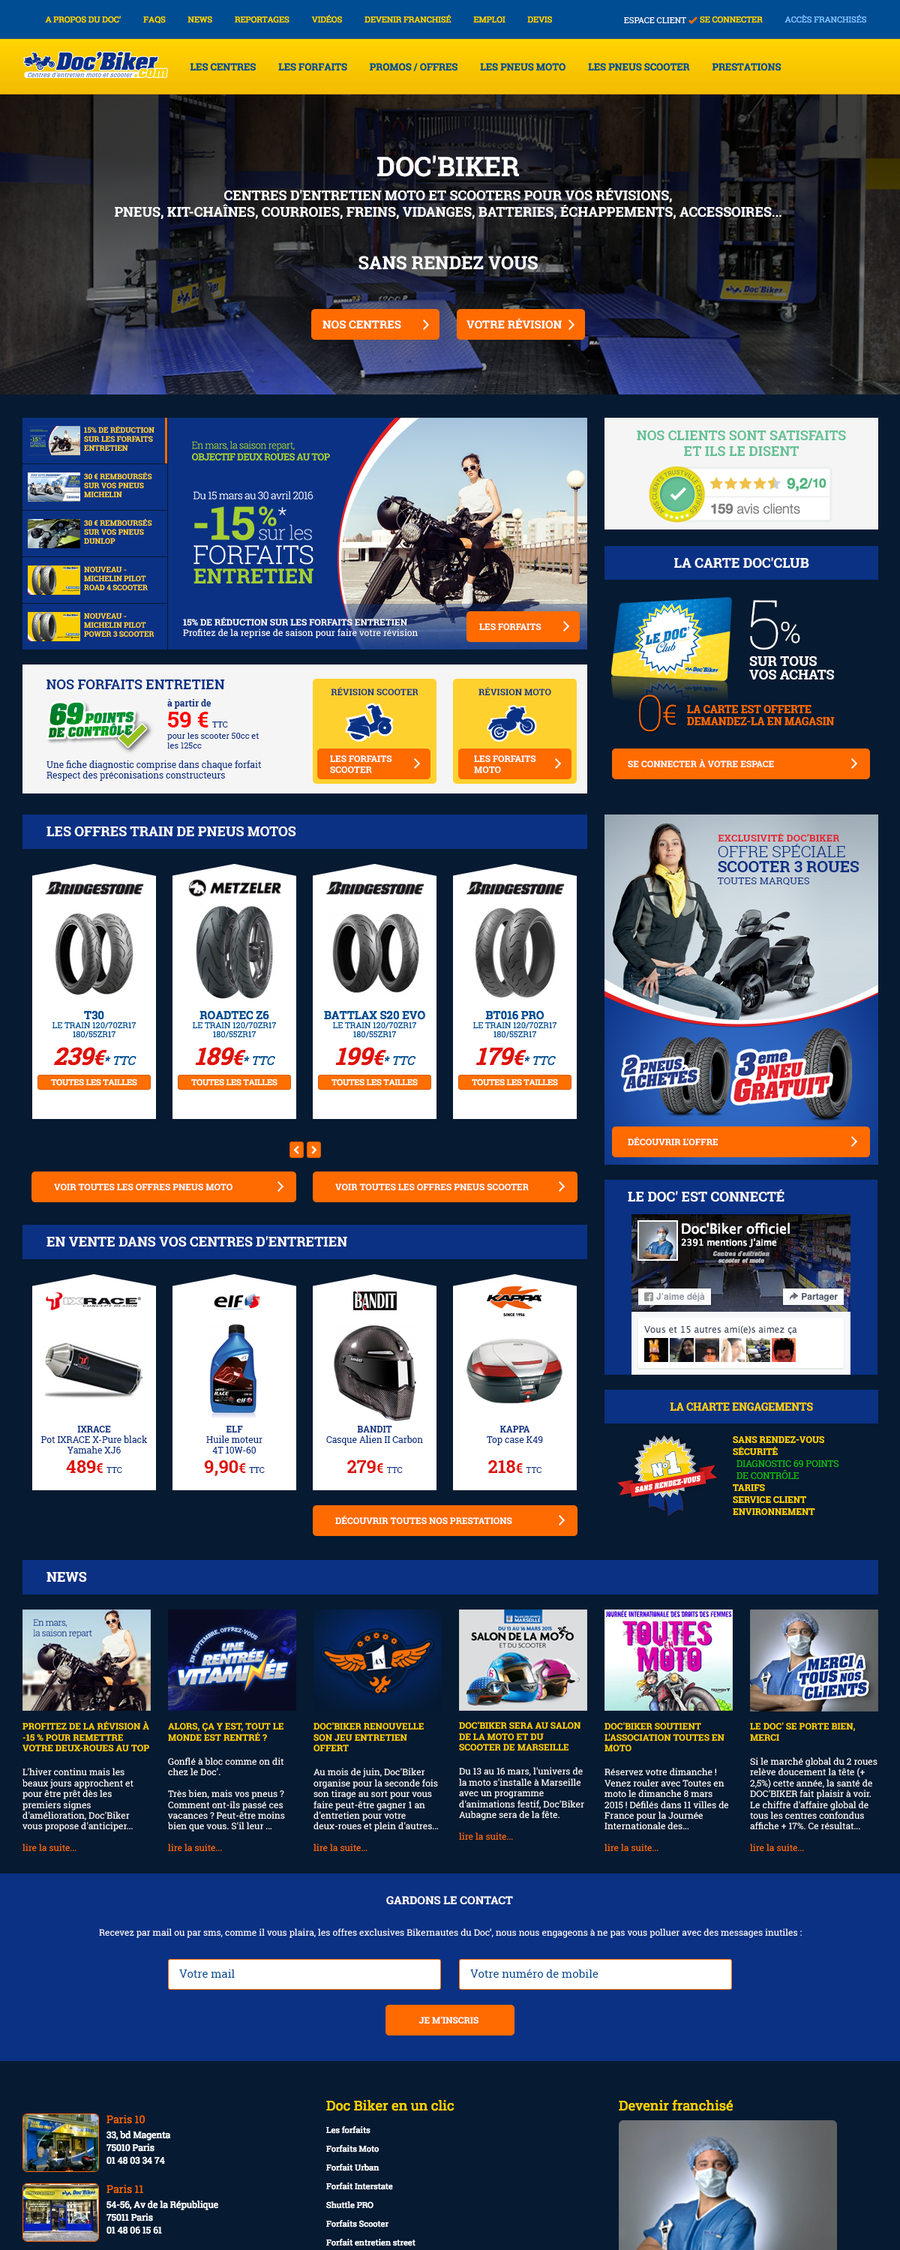
<style>
.page{position:relative;width:900px;height:2250px}
.page>*{position:absolute;margin:0}
.t1{font:13.5px "RobotoSlab-Bold";color:#ffffff}
.t2{font:27px "RobotoSlab-Bold";color:#ffffff}
.t3{font:18px "RobotoSlab-Bold";color:#ffffff}
.t4{font:11.2px "RobotoSlab-Bold";color:#ffffff}
.t5{font:7.5px "RobotoSlab-Bold";color:#ffd32f}
.t6{font:13.5px "RobotoSlab-Bold";color:#65c095}
.t7{font:7.5px "RobotoSlab-Bold";color:#ffd32f;text-transform:uppercase}
.t8{font:68px "RobotoSlab-Thin";color:#ffffff;text-transform:uppercase}
.t9{font:9px "RobotoSlab-Regular";color:#ffffff}
.t10{font:9px "RobotoSlab-Bold";color:#ffffff}
.t11{font:29.3px "RobotoSlab-Light";color:#ffffff;text-transform:uppercase}
.t12{font:13.5px/13.5px "RobotoSlab-Bold";color:#ffffff;text-transform:uppercase}
.t13{font:13.5px "RobotoSlab-Bold";color:#0a3184}
.t14{font:9px "RobotoSlab-Bold";color:#0a3184;text-transform:uppercase}
.t15{font:8.2px/11.2px "RobotoSlab-Regular";color:#0a3184}
.t16{font:9px/22.5px "RobotoSlab-Bold";color:#0a3184}
.t17{font:22.5px/21px "RobotoSlab-Bold";color:#ff0000}
.t18{font:8.2px/21px "RobotoSlab-Regular";color:#0a3184}
.t19{font:8.2px "RobotoSlab-Regular";color:#0a3184}
.t20{font:49.7px "RobotoSlab-Thin";color:#ff6b00;text-transform:uppercase}
.t21{font:27.8px "RobotoSlab-Light";color:#ff6b00;text-transform:uppercase;scale:1.03 1}
.t22{font:10.5px/12px "RobotoSlab-Bold";color:#ff6b00;text-transform:uppercase}
.t23{font:9px/10.5px "RobotoSlab-Regular";color:#0a3184}
.t24{font:9px "RobotoSlab-Bold";color:#ffffff;text-transform:uppercase}
.t25{font:13.5px "RobotoSlab-Bold";color:#ffffff;text-transform:uppercase}
.t26{font:10px "RobotoSlab-Bold";color:#e0232f}
.t27{font:15.7px/15.4px "RobotoSlab-Bold";color:#0a3184}
.t28{font:15.7px/18.4px "RobotoSlab-Light";color:#0a3184}
.t29{font:10px/11.5px "RobotoSlab-Regular";color:#0a3184}
.t30{font:10.5px "RobotoSlab-Bold";color:#ffd200;text-transform:uppercase}
.t31{font:9px/10.5px "RobotoSlab-Bold";color:#0a3184}
.t32{font:18px/19.5px "RobotoSlab-Bold";color:#de130c}
.t33{font:13.5px/19.5px "RobotoSlab-Bold";color:#de130c}
.t34{font:8.2px/19.5px "RobotoSlab-Regular";color:#0a3184}
.t35{font:9px/12px "RobotoSlab-Bold";color:#ffd200;text-transform:uppercase}
.t36{font:9px/12px "RobotoSlab-Regular";color:#14bb0b;text-transform:uppercase}
.t37{font:9px "RobotoSlab-Bold";color:#ffd200;text-transform:uppercase}
.t38{font:9px "RobotoSlab-Regular";color:#ff6b00}
.t39{font:11.2px "RobotoSlab-Bold";color:#ffffff;text-transform:uppercase}
.t40{font:11.2px "RobotoSlab-Regular";color:#004d93}
</style>
<div class="page">
<p class="t1" style="left:115px;top:155px;width:666px;height:115px;text-align:center"><span class="t2">DOC'BIKER <br></span>CENTRES D'ENTRETIEN MOTO ET SCOOTERS POUR VOS RÉVISIONS, <br>PNEUS, KIT-CHAÎNES, COURROIES, FREINS, VIDANGES, BATTERIES, ÉCHAPPEMENTS, ACCESSOIRES...<br><br><span class="t3">SANS RENDEZ VOUS</span></p>
<p class="t4" style="left:466px;top:318px;width:96px;height:11px">VOTRE RÉVISION</p>
<p class="t4" style="left:322px;top:320px;width:79px;height:9px">NOS CENTRES</p>
<p class="t5" style="left:84px;top:426px;width:70px;height:25px">15% DE RÉDUCTION SUR LES FORFAITS<br>ENTRETIEN</p>
<p class="t6" style="left:637px;top:430px;width:209px;height:27px;text-align:center">NOS CLIENTS SONT SATISFAITS<br>ET ILS LE DISENT</p>
<p class="t7" style="left:84px;top:472px;width:68px;height:25px">30 € remboursés<br>sur vos pneus michelin</p>
<p class="t7" style="left:84px;top:519px;width:68px;height:25px">30 € remboursés<br>sur vos pneus dunlop</p>
<p class="t1" style="left:674px;top:557px;width:135px;height:11px">LA CARTE DOC'CLUB</p>
<p class="t7" style="left:84px;top:566px;width:64px;height:24px">nouveau - michelin pilot road 4 scooter</p>
<p class="t8" style="left:750px;top:600px;width:28px;height:50px;rotate:1deg">5</p>
<p class="t7" style="left:84px;top:613px;width:70px;height:24px">nouveau - michelin pilot power 3 scooter</p>
<p class="t9" style="left:183px;top:617px;width:235px;height:21px"><span class="t10">15% DE RÉDUCTION SUR LES FORFAITS ENTRETIEN<br></span>Profitez de la reprise de saison pour faire votre révision</p>
<p class="t10" style="left:479px;top:623px;width:62px;height:7px">LES FORFAITS</p>
<p class="t11" style="left:781px;top:622px;width:19px;height:21px;rotate:1deg">%</p>
<p class="t12" style="left:749px;top:656px;width:85px;height:23px">sur tous <br>vos achats</p>
<p class="t13" style="left:46px;top:679px;width:179px;height:11px">NOS FORFAITS ENTRETIEN</p>
<p class="t14" style="left:331px;top:687px;width:87px;height:8px">révision scooter</p>
<p class="t14" style="left:478px;top:687px;width:73px;height:8px">révision moto</p>
<p class="t15" style="left:167px;top:699px;width:92px;height:49px"><span class="t16">à partir de<br></span><span class="t17">59 € </span><span class="t18">TTC <br></span>pour les scooter 50cc et <span class="t19">les 125cc</span></p>
<p class="t20" style="left:639px;top:694px;width:22px;height:37px;rotate:1deg">0</p>
<p class="t21" style="left:663px;top:704px;width:13px;height:21px">€</p>
<p class="t22" style="left:687px;top:705px;width:148px;height:20px">la carte est offerte<br>demandez-la en magasin</p>
<p class="t23" style="left:46px;top:760px;width:216px;height:21px">Une fiche diagnostic comprise dans chaque forfait <br>Respect des préconisations constructeurs</p>
<p class="t10" style="left:330px;top:755px;width:62px;height:18px;text-align:justify">LES FORFAITS<br><span class="t24">scooter</span></p>
<p class="t10" style="left:474px;top:755px;width:62px;height:18px;text-align:justify">LES FORFAITS<br><span class="t24">moto</span></p>
<p class="t10" style="left:628px;top:759px;width:146px;height:8px">SE CONNECTER À VOTRE ESPACE</p>
<p class="t25" style="left:46px;top:826px;width:250px;height:11px">LES OFFRES TRAIN DE PNEUS MOTOS</p>
<p class="t26" style="left:718px;top:833px;width:122px;height:8px">EXCLUSIVITÉ DOC’BIKER</p>
<p class="t27" style="left:717px;top:844px;width:142px;height:42px"><span class="t28">OFFRE SPÉCIALE<br></span>SCOOTER 3 ROUES<br><span class="t29">TOUTES MARQUES</span></p>
<p class="t10" style="left:628px;top:1137px;width:90px;height:8px">DÉCOUVRIR L'OFFRE</p>
<p class="t10" style="left:54px;top:1183px;width:178px;height:7px">VOIR TOUTES LES OFFRES PNEUS MOTO</p>
<p class="t10" style="left:335px;top:1183px;width:194px;height:7px">VOIR TOUTES LES OFFRES PNEUS SCOOTER</p>
<p class="t25" style="left:628px;top:1189px;width:156px;height:13px">LE DOC' EST CONNECTÉ</p>
<p class="t25" style="left:46px;top:1236px;width:301px;height:11px">EN VENTE DANS VOS CENTRES D'ENTRETIEN</p>
<p class="t30" style="left:670px;top:1402px;width:143px;height:9px">la CHARTE ENGAGEMENTS</p>
<p class="t23" style="left:41px;top:1426px;width:107px;height:47px;text-align:center"><span class="t31">IXRACE<br></span>Pot IXRACE X-Pure black<br>Yamahe XJ6<br><span class="t32">489</span><span class="t33">€ </span><span class="t34">TTC</span></p>
<p class="t23" style="left:204px;top:1426px;width:61px;height:50px;text-align:center"><span class="t31">ELF<br></span>Huile moteur <br>4T 10W-60<br><span class="t32">9,90</span><span class="t33">€ </span><span class="t34">TTC</span></p>
<p class="t23" style="left:326px;top:1426px;width:97px;height:47px;text-align:center"><span class="t31">BANDIT<br></span>Casque Alien II Carbon <br><br><span class="t32">279</span><span class="t33">€ </span><span class="t34">TTC</span></p>
<p class="t23" style="left:487px;top:1426px;width:56px;height:47px;text-align:center"><span class="t31">KAPPA<br></span>Top case K49<br><br><span class="t32">218</span><span class="t33">€ </span><span class="t34">TTC</span></p>
<p class="t35" style="left:733px;top:1436px;width:106px;height:79px">SANS RENDEZ-VOUS<br>SÉCURITÉ<br><span class="t36">DIAGNOSTIC 69 POINTS <br>DE CONTRÔLE<br></span>TARIFS<br>SERVICE CLIENT<br>ENVIRONNEMENT</p>
<p class="t10" style="left:335px;top:1516px;width:177px;height:8px">DÉCOUVRIR TOUTES NOS PRESTATIONS</p>
<p class="t25" style="left:46px;top:1571px;width:41px;height:11px">NEWS</p>
<p class="t9" style="left:22px;top:1721px;width:127px;height:130px"><span class="t37">Profitez de la révision à -15 % pour remettre votre deux-roues au top<br><br></span>L'hiver continu mais les beaux jours approchent et pour être prêt dès les premiers signes d'amélioration, Doc'Biker vous propose d'anticiper...<br><br><span class="t38">lire la suite...</span></p>
<p class="t9" style="left:313px;top:1722px;width:125px;height:129px"><span class="t37">Doc'Biker renouvelle son jeu entretien offert<br><br></span>Au mois de juin, Doc'Biker organise pour la seconde fois son tirage au sort pour vous faire peut-être gagner 1 an d'entretien pour votre deux-roues et plein d'autres... <br><br><span class="t38">lire la suite...</span></p>
<p class="t9" style="left:459px;top:1721px;width:125px;height:119px"><span class="t37">Doc'Biker sera au Salon de la Moto et du Scooter de Marseille<br><br></span>Du 13 au 16 mars, l'univers de la moto s'installe à Marseille avec un programme d'animations festif, Doc'Biker Aubagne sera de la fête.<br><br><span class="t38">lire la suite...</span></p>
<p class="t9" style="left:604px;top:1722px;width:124px;height:129px"><span class="t37">Doc'Biker soutient l'association Toutes en Moto<br><br></span>Réservez votre dimanche ! Venez rouler avec Toutes en moto le dimanche 8 mars 2015 ! Défilés dans 11 villes de France pour la Journée Internationale des...<br><br><span class="t38">lire la suite...</span></p>
<p class="t9" style="left:750px;top:1722px;width:127px;height:129px"><span class="t37">Le Doc' se porte bien, merci<br><br></span>Si le marché global du 2 roues relève doucement la tête (+ 2,5%) cette année, la santé de DOC'BIKER fait plaisir à voir. Le chiffre d'affaire global de tous les centres confondus affiche + 17%. Ce résultat...<br><br><span class="t38">lire la suite...</span></p>
<p class="t9" style="left:168px;top:1723px;width:117px;height:128px"><span class="t37">Alors, ça y est, tout le monde est rentré ?<br><br></span>Gonflé à bloc comme on dit chez le Doc'.<br><br>Très bien, mais vos pneus ? Comment ont-ils passé ces vacances ? Peut-être moins bien que vous. S'il leur ...<br><br><span class="t38">lire la suite...</span></p>
<p class="t39" style="left:386px;top:1896px;width:127px;height:9px">GARDONS LE CONTACT</p>
<p class="t9" style="left:99px;top:1928px;width:703px;height:10px">Recevez par mail ou par sms, comme il vous plaira, les offres exclusives Bikernautes du Doc’, nous nous engageons à ne pas vous polluer avec des messages inutiles :</p>
<p class="t40" style="left:179px;top:1969px;width:56px;height:9px">Votre mail</p>
<p class="t40" style="left:470px;top:1969px;width:128px;height:9px">Votre numéro de mobile</p>
<p class="t10" style="left:418px;top:2016px;width:60px;height:7px">JE M'INSCRIS</p>
</div>
